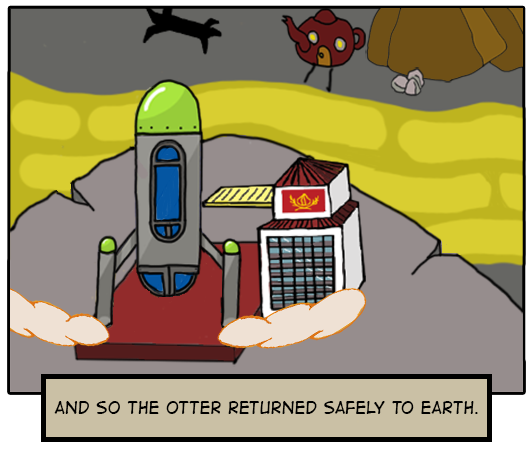
<style>
.page{position:relative;width:531px;height:450px}
.page>*{position:absolute;margin:0}
.t1{font:20.3px "DigitalStripBB";color:#000000}
</style>
<div class="page">
<p class="t1" style="left:54px;top:401px;width:424px;height:13px">And so the otter returned safely to Earth.</p>
</div>
